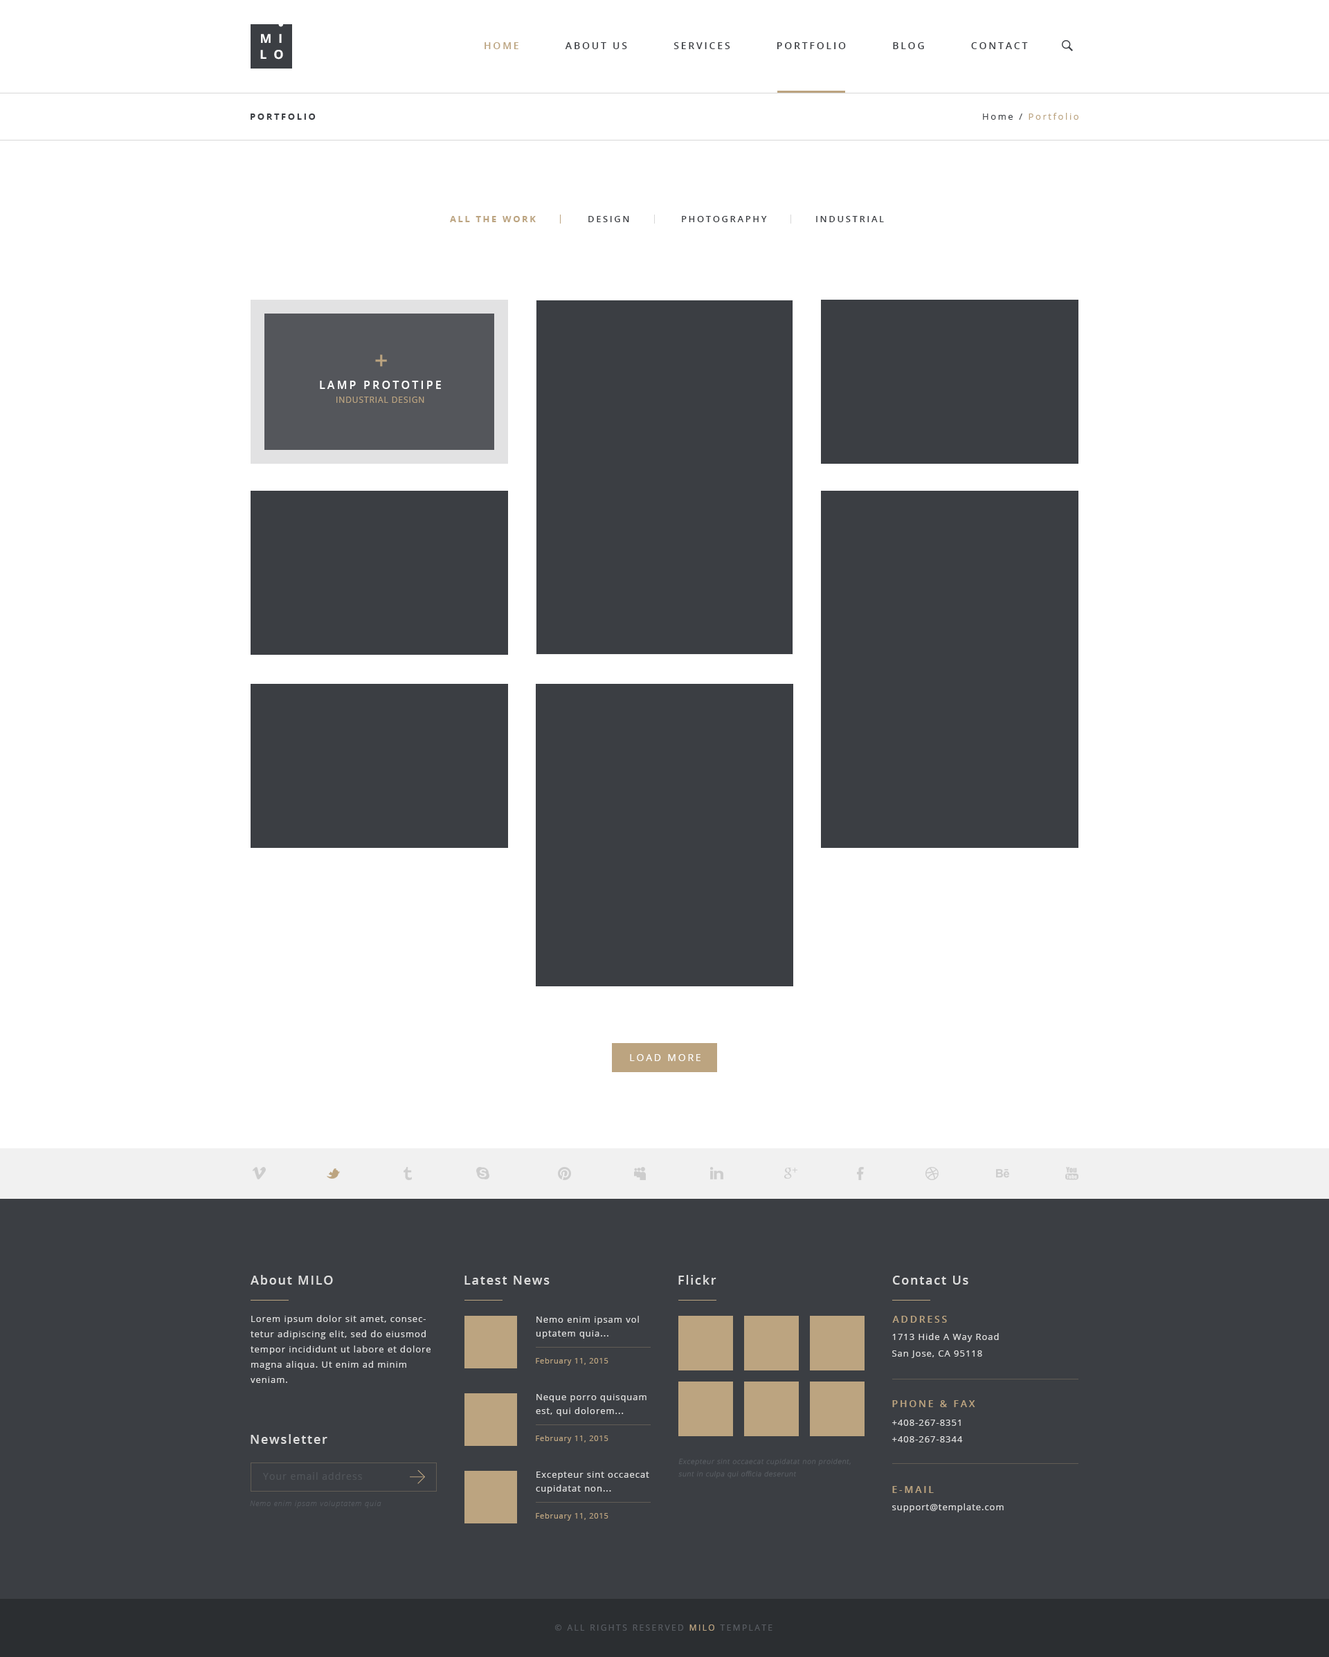
<style>
.page{position:relative;width:1329px;height:1657px;background:#ffffff}
.page>*{position:absolute;margin:0}
.t1{font:12.5px "OpenSans-Bold";letter-spacing:0.55em;color:#ffffff;text-transform:uppercase}
.t2{font:9.7px "OpenSans-Semibold";letter-spacing:0.2em;color:#3b3e43;text-transform:uppercase}
.t3{font:9.7px "OpenSans-Semibold";letter-spacing:0.2em;color:#bca480;text-transform:uppercase}
.t4{font:9px "OpenSans-Bold";letter-spacing:0.2em;color:#3b3e43;text-transform:uppercase}
.t5{font:9px "OpenSans";letter-spacing:0.2em;color:#bca480}
.t6{font:9px "OpenSans";letter-spacing:0.2em;color:#3b3e43}
.t7{font:9px "OpenSans-Bold";letter-spacing:0.2em;color:#bca480;text-transform:uppercase}
.t8{font:9px "OpenSans-Semibold";letter-spacing:0.2em;color:#3b3e43;text-transform:uppercase}
.t9{font:23.7px "OpenSans-Semibold";letter-spacing:0.075em;color:#bca480;text-transform:uppercase}
.t10{font:11.1px "OpenSans-Semibold";letter-spacing:0.2em;color:#ffffff;text-transform:uppercase}
.t11{font:8.3px "OpenSans";letter-spacing:0.075em;color:#bca480;text-transform:uppercase}
.t12{font:9.7px "OpenSans";letter-spacing:0.2em;color:#ffffff;text-transform:uppercase}
.t13{font:12.5px "OpenSans-Semibold";letter-spacing:0.1em;color:#dddddd}
.t14{font:9px/15.2px "OpenSans";letter-spacing:0.075em;color:#dddddd}
.t15{font:9px/13.8px "OpenSans";letter-spacing:0.075em;color:#dddddd}
.t16{font:9px/16.6px "OpenSans";letter-spacing:0.075em;color:#dddddd}
.t17{font:7.6px "OpenSans";letter-spacing:0.075em;color:#bca480}
.t18{font:9px/16.6px "OpenSans-Semibold";letter-spacing:0.075em;color:#dddddd}
.t19{font:6.9px/12.5px "OpenSans-Light";letter-spacing:0.075em;color:#585c62;font-style:italic}
.t20{font:9.7px "OpenSans";letter-spacing:0.075em;color:#505459}
.t21{font:7.6px "OpenSansLight-Italic";letter-spacing:0.075em;color:#53575d}
.t22{font:9px "OpenSans";letter-spacing:0.075em;color:#dddddd}
.t23{font:8.3px "OpenSans";letter-spacing:0.2em;color:#585c62;text-transform:uppercase}
.t24{font:8.3px "OpenSans";letter-spacing:0.2em;color:#bca480;text-transform:uppercase}
</style>
<div class="page">
<p class="t1" style="left:261px;top:34px;width:21px;height:9px">mi</p>
<p class="t1" style="left:260px;top:50px;width:23px;height:10px">lo</p>
<p class="t2" style="left:485px;top:42px;width:543px;height:7px"><span class="t3">Home          </span>About Us          Services          Portfolio          Blog          Contact</p>
<p class="t4" style="left:251px;top:114px;width:65px;height:6px">Portfolio</p>
<p class="t5" style="left:983px;top:113px;width:96px;height:7px"><span class="t6">Home / </span>Portfolio</p>
<p class="t7" style="left:450px;top:216px;width:86px;height:6px">all the work</p>
<p class="t8" style="left:588px;top:216px;width:41px;height:6px">Design</p>
<p class="t8" style="left:682px;top:216px;width:85px;height:6px">Photography</p>
<p class="t8" style="left:816px;top:216px;width:68px;height:6px">industrial</p>
<p class="t9" style="left:375px;top:354px;width:12px;height:13px">+</p>
<p class="t10" style="left:320px;top:381px;width:121px;height:8px">Lamp Prototipe</p>
<p class="t11" style="left:336px;top:397px;width:88px;height:6px">Industrial Design</p>
<p class="t12" style="left:630px;top:1054px;width:71px;height:7px">load more</p>
<p class="t13" style="left:251px;top:1275px;width:82px;height:10px">About MILO</p>
<p class="t13" style="left:465px;top:1276px;width:85px;height:9px">Latest News</p>
<p class="t13" style="left:678px;top:1275px;width:39px;height:10px">Flickr</p>
<p class="t13" style="left:892px;top:1276px;width:77px;height:9px">Contact Us</p>
<p class="t14" style="left:251px;top:1315px;width:180px;height:68px">Lorem ipsum dolor sit amet, consectetur adipiscing elit, sed do eiusmod tempor incididunt ut labore et dolore magna aliqua. Ut enim ad minim veniam.</p>
<p class="t15" style="left:536px;top:1316px;width:103px;height:23px">Nemo enim ipsam vol uptatem quia...</p>
<p class="t3" style="left:892px;top:1316px;width:55px;height:7px">Address</p>
<p class="t16" style="left:892px;top:1333px;width:107px;height:25px">1713 Hide A Way Road<br>San Jose, CA 95118</p>
<p class="t17" style="left:536px;top:1358px;width:73px;height:8px">February 11, 2015</p>
<p class="t15" style="left:536px;top:1394px;width:111px;height:22px">Neque porro quisquam est, qui dolorem...</p>
<p class="t3" style="left:892px;top:1401px;width:83px;height:6px">Phone &amp; Fax</p>
<p class="t16" style="left:892px;top:1420px;width:71px;height:23px"><span class="t18"><br></span>+408-267-8351<br>+408-267-8344</p>
<p class="t13" style="left:251px;top:1434px;width:76px;height:10px">Newsletter</p>
<p class="t17" style="left:536px;top:1436px;width:73px;height:7px">February 11, 2015</p>
<p class="t19" style="left:678px;top:1459px;width:173px;height:20px">Excepteur sint occaecat cupidatat non proident, sunt in culpa qui officia deserunt</p>
<p class="t20" style="left:263px;top:1473px;width:99px;height:7px">Your email address</p>
<p class="t15" style="left:536px;top:1472px;width:113px;height:22px">Excepteur sint occaecat cupidatat non...</p>
<p class="t3" style="left:892px;top:1486px;width:42px;height:7px">E-mail</p>
<p class="t21" style="left:250px;top:1501px;width:131px;height:8px">Nemo enim ipsam voluptatem quia</p>
<p class="t22" style="left:892px;top:1504px;width:112px;height:9px">support@template.com</p>
<p class="t17" style="left:536px;top:1513px;width:73px;height:8px">February 11, 2015</p>
<p class="t23" style="left:555px;top:1625px;width:218px;height:6px">© All Rights Reserved <span class="t24">MILO</span> template</p>
</div>
